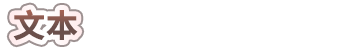
<style>
.page{position:relative;width:360px;height:50px;background:#ffffff}
.page>*{position:absolute;margin:0}
.t1{font:32px "SourceHanSansSC-Bold";font-weight:bold}
</style>
<div class="page">
<p class="t1" style="left:13px;top:9px;width:65px;height:32px">文本</p>
</div>
